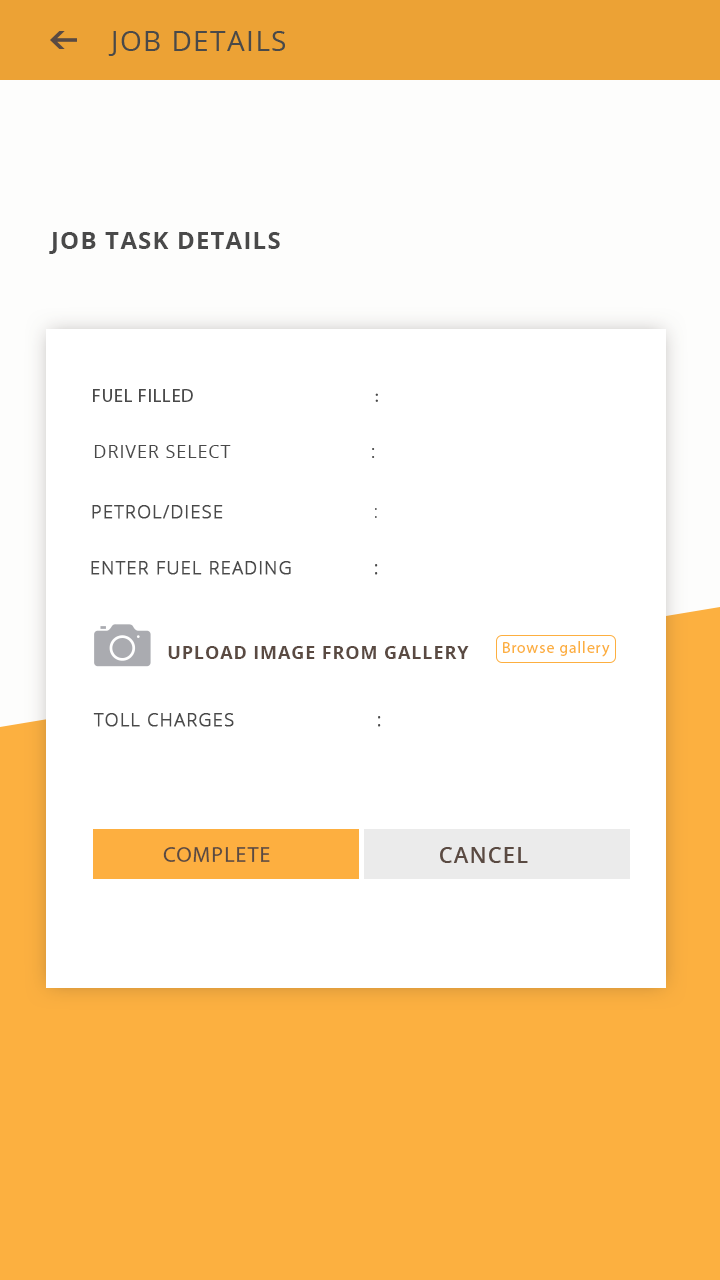
<style>
.page{position:relative;width:720px;height:1280px;background:#ffffff}
.page>*{position:absolute;margin:0}
.t1{font:28px "OpenSans";letter-spacing:0.05em;color:#494949;text-transform:uppercase}
.t2{font:24px "OpenSans-Bold";letter-spacing:0.05em;color:#494949;text-transform:uppercase}
.t3{font:18px "MyriadPro-Regular";letter-spacing:0.05em;color:#494949;text-transform:uppercase}
.t4{font:18px "OpenSans-Regular";letter-spacing:0.05em;color:#494949;text-transform:uppercase}
.t5{font:18px "OpenSans-Light";letter-spacing:0.05em;color:#494949;font-weight:bold}
.t6{font:18px "OpenSans-Light";letter-spacing:0.05em;color:#494949;text-transform:uppercase}
.t7{font:16px "MyriadPro-Regular";letter-spacing:0.05em;color:#fcb040}
.t8{font:18px "OpenSans-Bold";letter-spacing:0.05em;color:#5a4a42;text-transform:uppercase}
.t9{font:22px "MyriadPro-Regular";letter-spacing:0.05em;color:#5a4a42}
.t10{font:22px "OpenSans-Semibold";letter-spacing:0.05em;color:#5a4a42}
</style>
<div class="page">
<p class="t1" style="left:108px;top:31px;width:177px;height:25px">JOB DETAILS</p>
<p class="t2" style="left:49px;top:232px;width:231px;height:22px">Job task details</p>
<p class="t3" style="left:93px;top:389px;width:285px;height:13px">fuel Filled  :</p>
<p class="t4" style="left:94px;top:445px;width:281px;height:13px">DRIVER SELECT  :</p>
<p class="t5" style="left:92px;top:505px;width:285px;height:14px">PETROL/DIESE  <span class="t6">:</span></p>
<p class="t5" style="left:91px;top:561px;width:287px;height:14px">ENTER FUEL READING :</p>
<p class="t7" style="left:503px;top:641px;width:107px;height:16px">Browse gallery</p>
<p class="t8" style="left:168px;top:646px;width:301px;height:13px">Upload image from gallery</p>
<p class="t5" style="left:93px;top:713px;width:288px;height:14px">TOLL CHARGES  :</p>
<p class="t9" style="left:163px;top:847px;width:107px;height:15px">COMPLETE</p>
<p class="t10" style="left:440px;top:847px;width:88px;height:16px">CANCEL</p>
</div>
